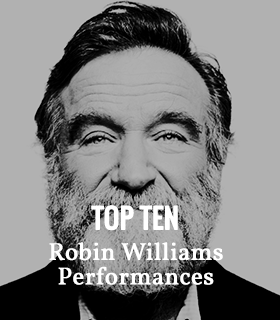
<style>
.page{position:relative;width:280px;height:320px;background:#b1b1b1}
.page>*{position:absolute;margin:0}
.t1{font:26.4px "Oswald-Regular";color:#ffffff;font-weight:bold}
.t2{font:24.5px/24.5px "Vollkorn-Regular";color:#ffffff;font-weight:bold}
</style>
<div class="page">
<p class="t1" style="left:91px;top:205px;width:87px;height:26px">TOP TEN</p>
<p class="t2" style="left:49px;top:242px;width:174px;height:43px;text-align:center">Robin Williams<br>Performances</p>
</div>
